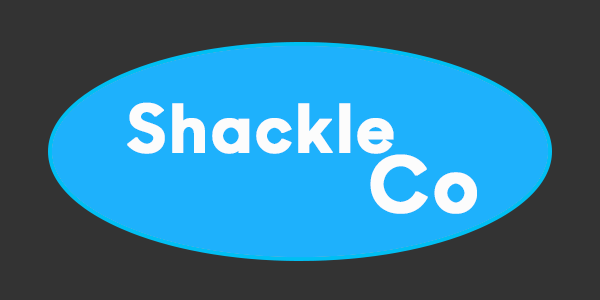
<style>
.page{position:relative;width:600px;height:300px;background:#333333}
.page>*{position:absolute;margin:0}
.t1{font:66.7px "SharpSansNo1-Bold";letter-spacing:0.051em;color:#fcfcfc;font-weight:bold}
.t2{font:77.8px "SharpSansNo1-Bold";letter-spacing:0.051em;color:#fcfcfc;font-weight:bold}
</style>
<div class="page">
<p class="t1" style="left:127px;top:102px;width:267px;height:52px">Shackle</p>
<p class="t2" style="left:370px;top:154px;width:107px;height:60px">Co</p>
</div>
